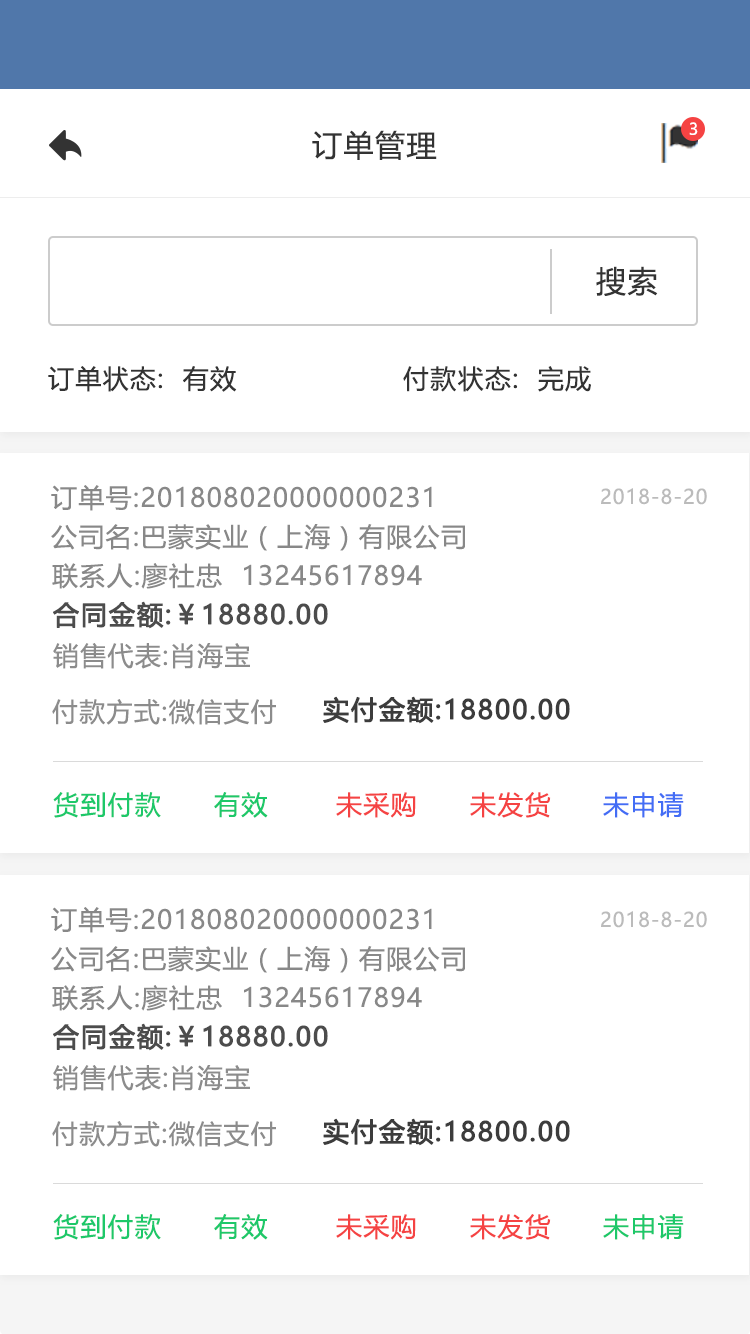
<style>
.page{position:relative;width:750px;height:1334px;background:#ffffff}
.page>*{position:absolute;margin:0}
.t1{font:16px "MicrosoftYaHeiUI";color:#ffffff}
.t2{font:30px "MicrosoftYaHeiUI";letter-spacing:0.05em;color:#333333}
.t3{font:26px "MicrosoftYaHeiUI";letter-spacing:0.05em;color:#333333}
.t4{font:26px "MicrosoftYaHeiUI";letter-spacing:0.05em;color:#888888}
.t5{font:20px "MicrosoftYaHeiUI";letter-spacing:0.05em;color:#bbbbbb}
.t6{font:26px "MicrosoftYaHeiUI";letter-spacing:0.05em;color:#4c4c4c;font-weight:bold}
.t7{font:26px "MicrosoftYaHeiUI";letter-spacing:0.05em;color:#8c8c8c}
.t8{font:26px "MicrosoftYaHeiUI";letter-spacing:0.05em;color:#3c3c3c;font-weight:bold}
.t9{font:26px "MicrosoftYaHeiUI";letter-spacing:0.05em;color:#1dc869}
.t10{font:26px "MicrosoftYaHeiUI";letter-spacing:0.05em;color:#f54343}
.t11{font:26px "MicrosoftYaHeiUI";letter-spacing:0.05em;color:#436df5}
</style>
<div class="page">
<p class="t1" style="left:689px;top:122px;width:9px;height:13px">3</p>
<p class="t2" style="left:312px;top:130px;width:125px;height:30px">订单管理</p>
<p class="t2" style="left:596px;top:266px;width:62px;height:30px">搜索</p>
<p class="t3" style="left:48px;top:366px;width:189px;height:26px">订单状态:  有效</p>
<p class="t3" style="left:403px;top:366px;width:188px;height:26px">付款状态:  完成</p>
<p class="t4" style="left:51px;top:485px;width:381px;height:26px">订单号:201808020000000231</p>
<p class="t5" style="left:601px;top:488px;width:106px;height:17px">2018-8-20</p>
<p class="t4" style="left:51px;top:524px;width:414px;height:27px">公司名:巴蒙实业（上海）有限公司</p>
<p class="t4" style="left:52px;top:563px;width:370px;height:26px">联系人:廖社忠  13245617894</p>
<p class="t6" style="left:53px;top:601px;width:275px;height:28px">合同金额:￥18880.00</p>
<p class="t7" style="left:53px;top:643px;width:197px;height:26px">销售代表:肖海宝</p>
<p class="t7" style="left:52px;top:699px;width:224px;height:26px">付款方式:微信支付</p>
<p class="t8" style="left:323px;top:696px;width:247px;height:28px">实付金额:18800.00</p>
<p class="t9" style="left:53px;top:792px;width:108px;height:26px">货到付款</p>
<p class="t9" style="left:214px;top:792px;width:54px;height:26px">有效</p>
<p class="t10" style="left:336px;top:792px;width:80px;height:26px">未采购</p>
<p class="t10" style="left:470px;top:792px;width:81px;height:26px">未发货</p>
<p class="t11" style="left:603px;top:792px;width:81px;height:26px">未申请</p>
<p class="t4" style="left:51px;top:907px;width:381px;height:26px">订单号:201808020000000231</p>
<p class="t5" style="left:601px;top:911px;width:106px;height:17px">2018-8-20</p>
<p class="t4" style="left:51px;top:946px;width:414px;height:27px">公司名:巴蒙实业（上海）有限公司</p>
<p class="t4" style="left:52px;top:985px;width:370px;height:26px">联系人:廖社忠  13245617894</p>
<p class="t6" style="left:53px;top:1023px;width:275px;height:28px">合同金额:￥18880.00</p>
<p class="t7" style="left:53px;top:1065px;width:197px;height:26px">销售代表:肖海宝</p>
<p class="t7" style="left:52px;top:1121px;width:224px;height:26px">付款方式:微信支付</p>
<p class="t8" style="left:323px;top:1118px;width:247px;height:28px">实付金额:18800.00</p>
<p class="t9" style="left:53px;top:1214px;width:108px;height:26px">货到付款</p>
<p class="t9" style="left:214px;top:1214px;width:54px;height:26px">有效</p>
<p class="t10" style="left:336px;top:1214px;width:80px;height:26px">未采购</p>
<p class="t10" style="left:470px;top:1214px;width:81px;height:26px">未发货</p>
<p class="t9" style="left:603px;top:1214px;width:81px;height:26px">未申请</p>
</div>
